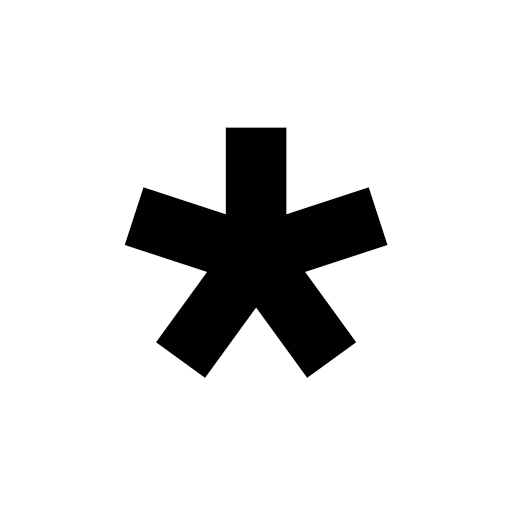
<style>
.page{position:relative;width:512px;height:512px;background:#ffffff}
.page>*{position:absolute;margin:0}
.t1{font:650px "Eau-SansBlack";color:#010101}
</style>
<div class="page">
<p class="t1" style="left:124px;top:127px;width:264px;height:251px">*</p>
</div>
